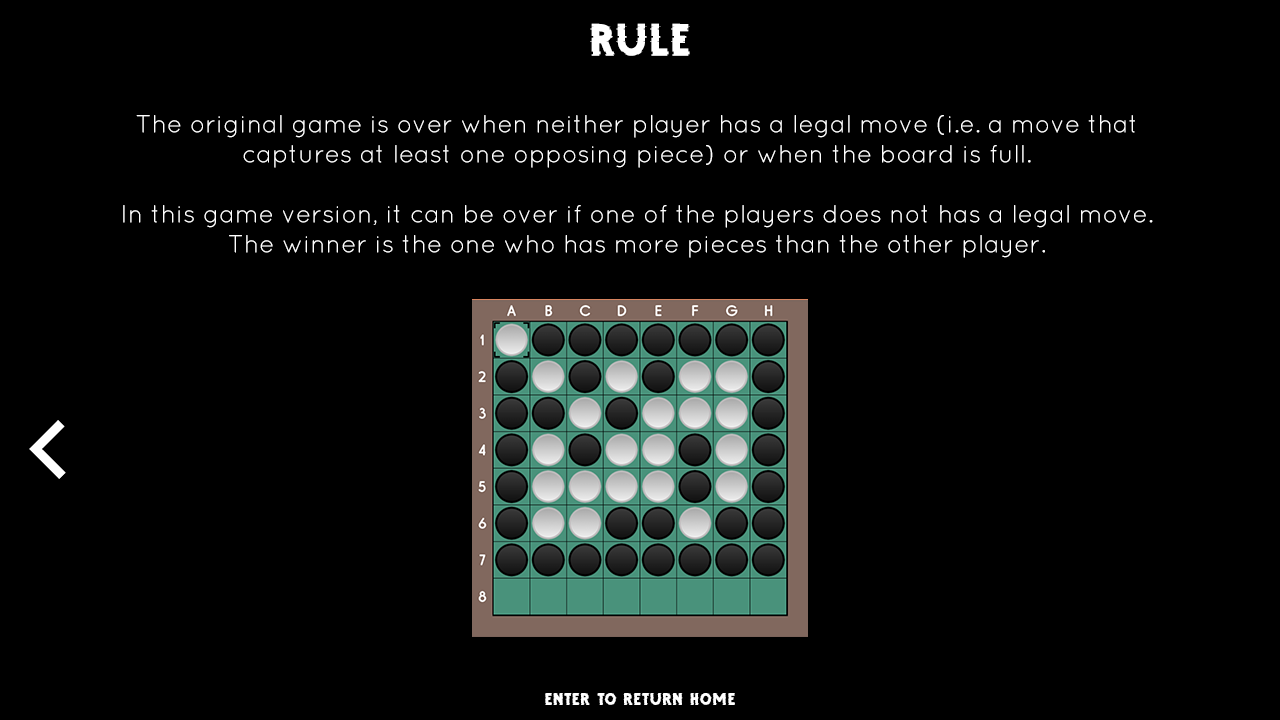
<style>
.page{position:relative;width:1280px;height:720px;background:#000000}
.page>*{position:absolute;margin:0}
.t1{font:66.7px "DEBUGFREETRIAL";color:#ffffff}
.t2{font:25px "Quicksand-Regular";color:#ffffff}
.t3{font:25px "DEBUGFREETRIAL";color:#ffffff}
</style>
<div class="page">
<p class="t1" style="left:590px;top:23px;width:100px;height:33px">RULE</p>
<p class="t2" style="left:123px;top:115px;width:1030px;height:143px;text-align:center">The original game is over when neither player has a legal move (i.e. a move that captures at least one opposing piece) or when the board is full.<br><br>In this game version, it can be over if one of the players does not has a legal move. The winner is the one who has more pieces than the other player.</p>
<p class="t3" style="left:545px;top:693px;width:190px;height:12px">ENTER TO RETURN HOME</p>
</div>
